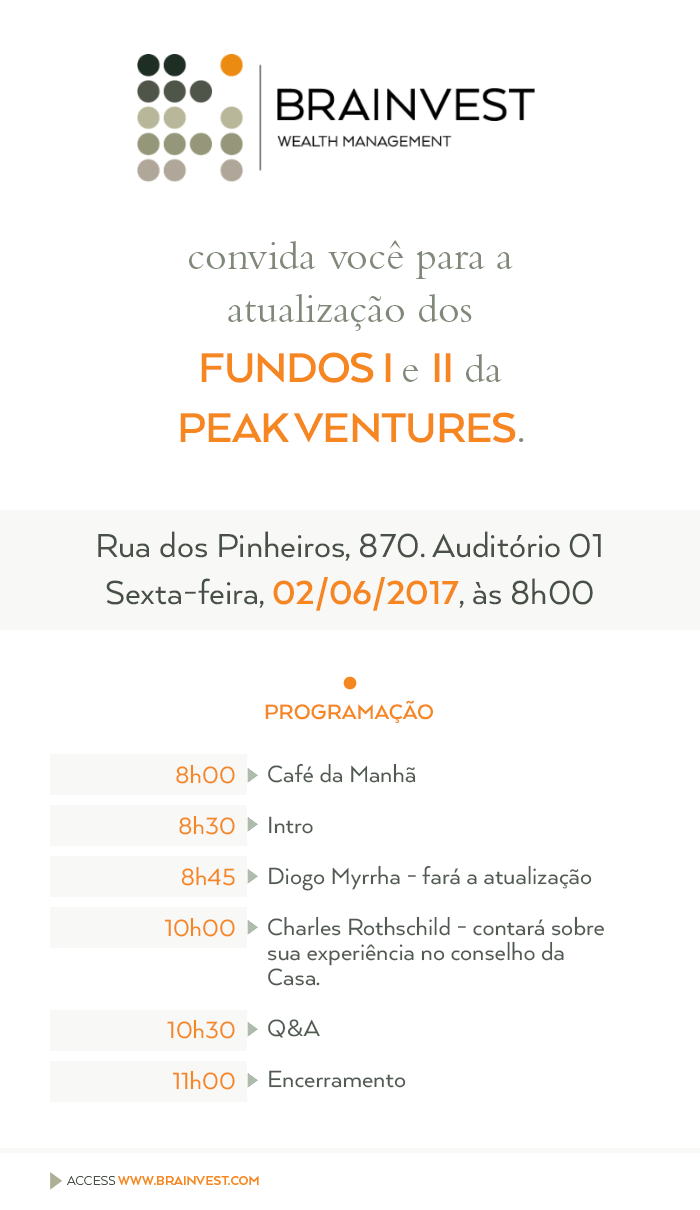
<style>
.page{position:relative;width:700px;height:1210px;background:#ffffff}
.page>*{position:absolute;margin:0}
.t1{font:42px/53px "BemboStd";color:#808979}
.t2{font:48px/60px "ArquitectaBold";letter-spacing:-0.025em;color:#f6861f;text-transform:uppercase}
.t3{font:38.2px "Arquitecta";color:#485047}
.t4{font:38.2px "Arquitecta";color:#475047}
.t5{font:38.2px "ArquitectaBold";color:#f6861f}
.t6{font:24px "ArquitectaBold";color:#f6861f;text-transform:uppercase}
.t7{font:27px/51px "Arquitecta";color:#f6861f}
.t8{font:27px/51px "Arquitecta";color:#515a51}
.t9{font:27px/25px "Arquitecta";color:#515a51}
</style>
<div class="page">
<p class="t1" style="left:180px;top:240px;width:344px;height:203px;text-align:center">convida você para a <br>atualização dos <br><span class="t2">FundoS I </span>e <span class="t2">II</span> da <br><span class="t2">peak Ventures</span>.</p>
<p class="t3" style="left:98px;top:531px;width:503px;height:30px">Rua dos Pinheiros, 870. Auditório 01</p>
<p class="t4" style="left:106px;top:577px;width:487px;height:34px">Sexta-feira, <span class="t5">02/06/2017</span>, às 8h00</p>
<p class="t6" style="left:265px;top:700px;width:168px;height:23px">Programação</p>
<p class="t7" style="left:164px;top:764px;width:71px;height:326px;text-align:right">8h00<br>8h30<br>8h45<br>10h00<br><br>10h30<br>11h00</p>
<p class="t8" style="left:268px;top:763px;width:336px;height:325px">Café da Manhã<br>Intro<br>Diogo Myrrha - fará a atualização<br>Charles Rothschild - <span class="t9">contará sobre sua experiência no conselho da Casa.<br></span>Q&amp;A<br>Encerramento</p>
</div>
